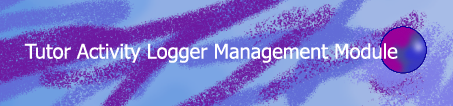
<style>
.page{position:relative;width:453px;height:106px}
.page>*{position:absolute;margin:0}
.t1{font:20px "Tahoma";color:#ffffff}
</style>
<div class="page">
<p class="t1" style="left:24px;top:43px;width:374px;height:20px">Tutor Activity Logger Management Module</p>
</div>
